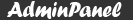
<style>
.page{position:relative;width:133px;height:20px;background:#333333}
.page>*{position:absolute;margin:0}
.t1{font:21.6px "ForteMT";color:#ffffff}
</style>
<div class="page">
<p class="t1" style="left:7px;top:1px;width:115px;height:18px">AdminPanel</p>
</div>
